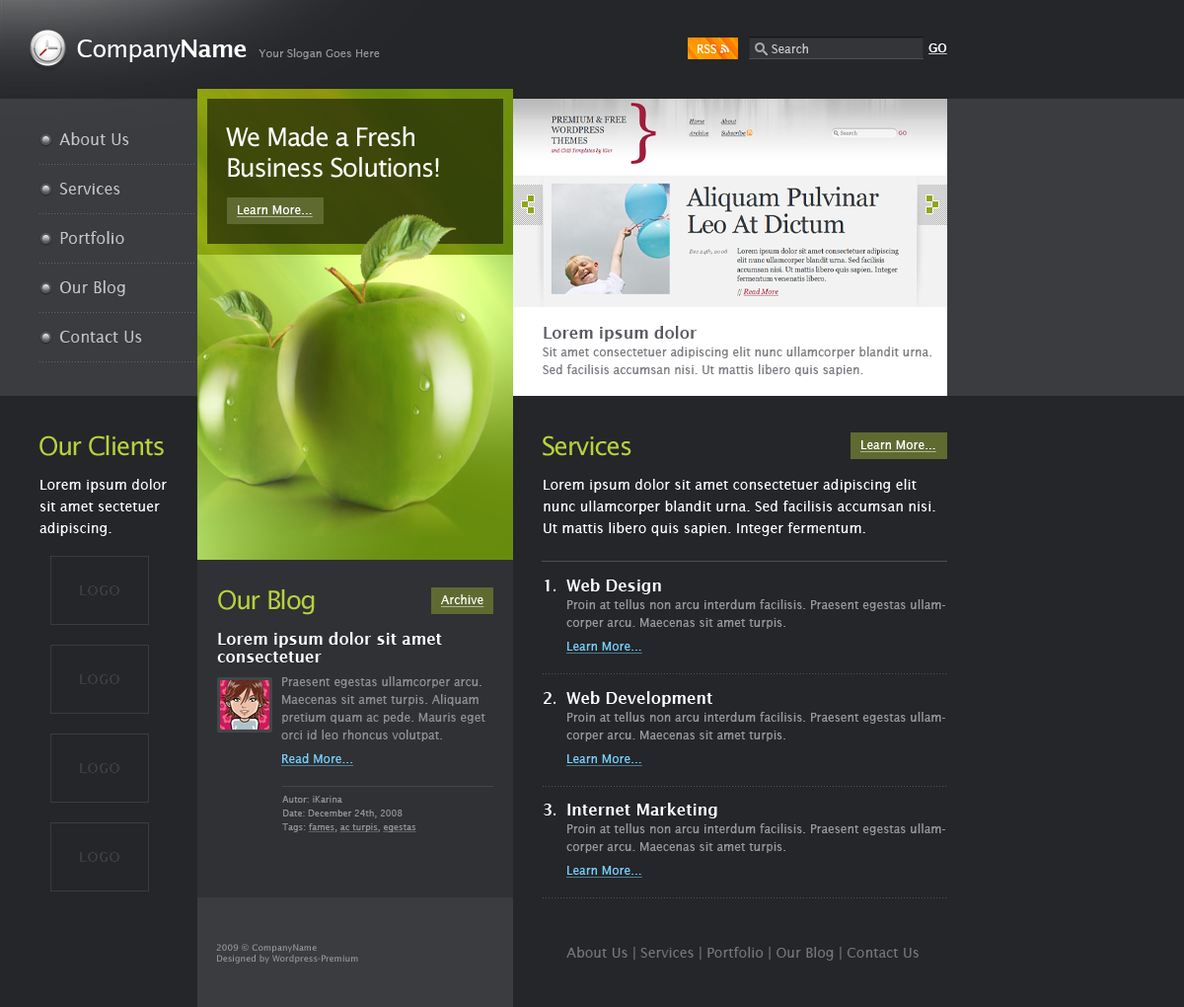
<style>
.page{position:relative;width:1184px;height:1007px;background:#242629}
.page>*{position:absolute;margin:0}
.t1{font:23.7px "LucidaSans";letter-spacing:-0.025em;color:#ffffff}
.t2{font:23.7px "LucidaSans-Demi";letter-spacing:-0.025em;color:#ffffff}
.t3{font:10.9px "LucidaSans";color:#929395}
.t4{font:11.8px "LucidaSans";color:#ffffff}
.t5{font:11.8px "LucidaSans";color:#c2c3c4}
.t6{font:15.8px/49.4px "LucidaSans";color:#c4c5c6}
.t7{font:25.7px "LucidaSans";letter-spacing:-0.05em;color:#ffffff}
.t8{font:11.8px "LucidaSans";color:#ffffff;text-decoration:underline}
.t9{font:11.8px/17.8px "LucidaSans";color:#7b7d82}
.t10{font:15.8px/17.8px "LucidaSans-Demi";color:#585a60}
.t11{font:25.7px "LucidaSans";letter-spacing:-0.05em;color:#b8d13e}
.t12{font:13.8px/21.7px "LucidaSans";color:#ffffff}
.t13{font:15.8px "LucidaSans-Demi";color:#ffffff}
.t14{font:15.8px "MyriadPro-Regular";color:#ffffff}
.t15{font:11.8px/17.8px "LucidaSans";color:#979798}
.t16{font:15.8px/17.8px "LucidaSans-Demi";color:#ffffff}
.t17{font:11.8px/23.7px "LucidaSans";color:#76d0ff;text-decoration:underline}
.t18{font:11.8px/17.8px "LucidaSans";color:#8f8f91}
.t19{font:11.8px/23.7px "LucidaSans";color:#8f8f91}
.t20{font:8.9px/13.8px "LucidaSans";color:#8f8f91}
.t21{font:8.9px/13.8px "LucidaSans";color:#8f8f91;text-decoration:underline}
.t22{font:8.9px/13.8px "LucidaSans";color:#76d0ff;text-decoration:underline}
.t23{font:8.9px "LucidaSans";color:#979798}
.t24{font:13.8px "LucidaSans";color:#757577}
</style>
<div class="page">
<p class="t1" style="left:77px;top:39px;width:170px;height:23px">Company<span class="t2">Name</span></p>
<p class="t3" style="left:259px;top:48px;width:121px;height:11px">Your Slogan Goes Here</p>
<p class="t4" style="left:698px;top:44px;width:19px;height:9px">RSS</p>
<p class="t5" style="left:772px;top:43px;width:36px;height:10px">Search</p>
<p class="t6" style="left:59px;top:132px;width:83px;height:210px">About Us<br>Services<br>Portfolio<br>Our Blog<br>Contact Us</p>
<p class="t7" style="left:226px;top:126px;width:213px;height:52px">We Made a Fresh<br>Business Solutions!</p>
<p class="t8" style="left:237px;top:205px;width:76px;height:12px">Learn More...</p>
<p class="t9" style="left:543px;top:326px;width:389px;height:50px"><span class="t10">Lorem ipsum dolor <br></span>Sit amet consectetuer adipiscing elit nunc ullamcorper blandit urna. Sed facilisis accumsan nisi. Ut mattis libero quis sapien.</p>
<p class="t11" style="left:39px;top:435px;width:125px;height:21px">Our Clients</p>
<p class="t11" style="left:543px;top:435px;width:89px;height:21px">Services</p>
<p class="t8" style="left:861px;top:440px;width:76px;height:12px">Learn More...</p>
<p class="t12" style="left:39px;top:479px;width:128px;height:57px">Lorem ipsum dolor sit amet sectetuer adipiscing.</p>
<p class="t12" style="left:544px;top:479px;width:392px;height:57px">Lorem ipsum dolor sit amet consectetuer adipiscing elit nunc ullamcorper blandit urna. Sed facilisis accumsan nisi. Ut mattis libero quis sapien. Integer fermentum.</p>
<p class="t13" style="left:545px;top:579px;width:12px;height:12px">1<span class="t14">.</span></p>
<p class="t15" style="left:567px;top:578px;width:379px;height:75px"><span class="t16">Web Design<br></span>Proin at tellus non arcu interdum facilisis. Praesent egestas ullamcorper arcu. Maecenas sit amet turpis. <br><span class="t17">Learn More...</span></p>
<p class="t11" style="left:218px;top:589px;width:97px;height:26px">Our Blog</p>
<p class="t8" style="left:441px;top:594px;width:44px;height:13px">Archive</p>
<p class="t18" style="left:217px;top:632px;width:269px;height:134px"><span class="t16">Lorem ipsum dolor sit amet consectetuer<br></span><span class="t19">Praesent egestas ulla</span>mcorper arcu. Maecenas sit amet turpis. Aliquam pretium quam ac pede. Mauris eget orci id leo rhoncus volutpat. <br><span class="t17">Read More...</span></p>
<p class="t13" style="left:544px;top:692px;width:13px;height:12px">2<span class="t14">.</span></p>
<p class="t15" style="left:567px;top:691px;width:379px;height:75px"><span class="t16">Web Development<br></span>Proin at tellus non arcu interdum facilisis. Praesent egestas ullamcorper arcu. Maecenas sit amet turpis. <br><span class="t17">Learn More...</span></p>
<p class="t20" style="left:282px;top:796px;width:135px;height:36px">Autor: iKarina<br>Date: December 24th, 2008<br>Tags: <span class="t21">fames</span>, <span class="t21">ac turpis</span>, <span class="t21">egestas<br><br></span><span class="t22">Read More...</span></p>
<p class="t13" style="left:544px;top:803px;width:13px;height:12px">3<span class="t14">.</span></p>
<p class="t15" style="left:567px;top:802px;width:379px;height:75px"><span class="t16">Internet Marketing<br></span>Proin at tellus non arcu interdum facilisis. Praesent egestas ullamcorper arcu. Maecenas sit amet turpis. <br><span class="t17">Learn More...</span></p>
<p class="t23" style="left:216px;top:944px;width:142px;height:19px">2009 © CompanyName<br>Designed by Wordpress-Premium</p>
<p class="t24" style="left:567px;top:947px;width:352px;height:13px">About Us | Services | Portfolio | Our Blog | Contact Us</p>
</div>
